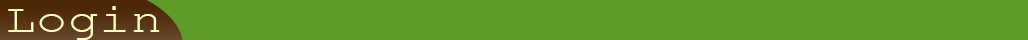
<style>
.page{position:relative;width:1028px;height:40px;background:#5e9b29}
.page>*{position:absolute;margin:0}
.t1{font:40.3px "CourierNewPSMT";color:#ffffbe;scale:1.3 1}
</style>
<div class="page">
<p class="t1" style="left:8px;top:6px;width:152px;height:34px">Login</p>
</div>
